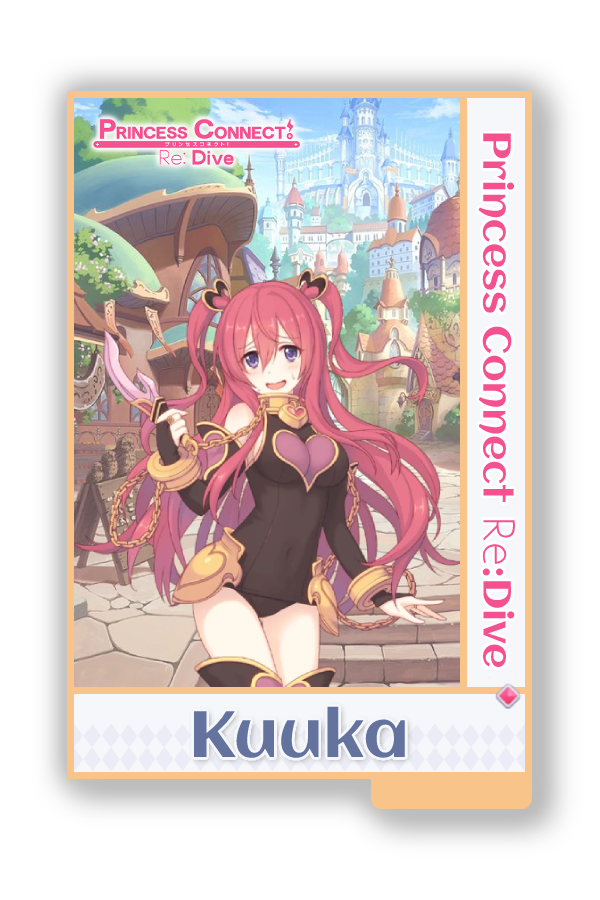
<style>
.page{position:relative;width:600px;height:900px;background:#ffffff}
.page>*{position:absolute;margin:0}
.t1{font:39px "Aclonica-Regular";color:#f55191}
.t2{font:39px "AaarghNormal";color:#f55191}
.t3{font:65px "Aclonica-Regular";color:#64739d}
</style>
<div class="page">
<p class="t1" style="left:478px;top:133px;width:38px;height:534px;rotate:90deg">Princess Connect <span class="t2">Re</span>:Dive</p>
<p class="t3" style="left:193px;top:706px;width:212px;height:52px">Kuuka</p>
</div>
